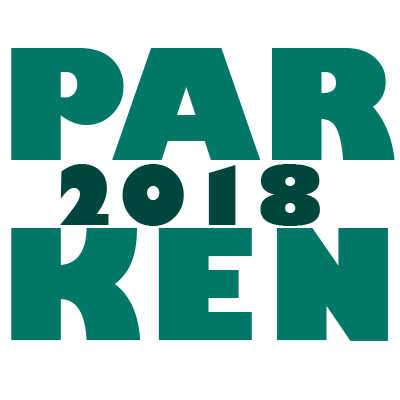
<style>
.page{position:relative;width:400px;height:400px;background:#ffffff}
.page>*{position:absolute;margin:0}
.t1{font:150px "GillSans-UltraBold";color:#007767}
.t2{font:80px "GillSans-UltraBold";color:#00463d}
</style>
<div class="page">
<p class="t1" style="left:11px;top:48px;width:384px;height:293px">PARK E  N</p>
<p class="t2" style="left:60px;top:164px;width:260px;height:62px">2018</p>
</div>
